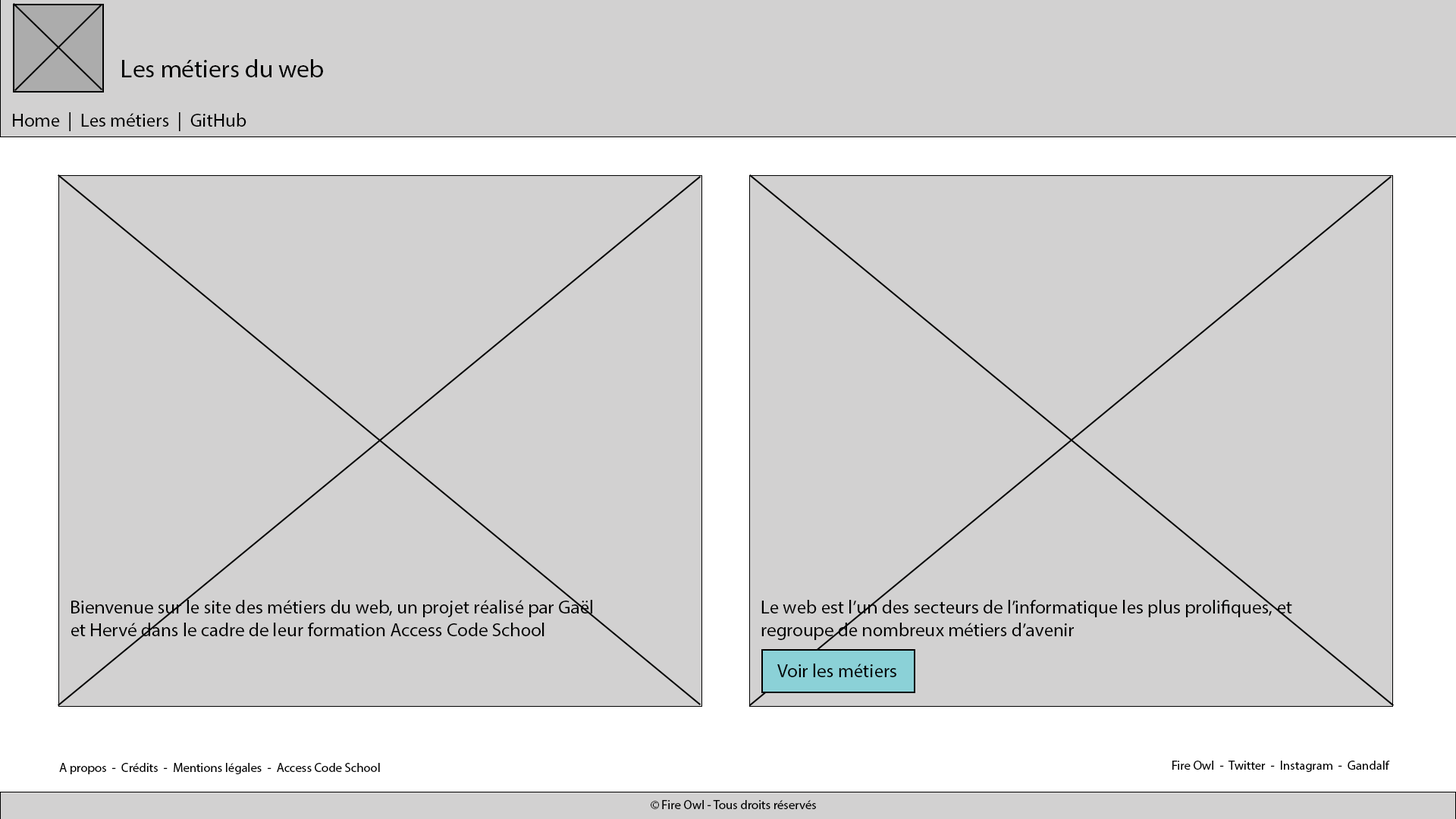
<style>
.page{position:relative;width:1456px;height:819px;background:#d2d1d1}
.page>*{position:absolute;margin:0}
.t1{font:25.3px "MyriadPro-Regular";color:#000000}
.t2{font:19px "MyriadPro-Regular";color:#000000}
.t3{font:12.6px "MyriadPro-Regular";color:#000000}
</style>
<div class="page">
<p class="t1" style="left:122px;top:59px;width:201px;height:18px">Les métiers du web</p>
<p class="t2" style="left:13px;top:112px;width:233px;height:19px">Home  |  Les métiers  |  GitHub</p>
<p class="t2" style="left:71px;top:600px;width:521px;height:36px">Bienvenue sur le site des métiers du web, un projet réalisé par Gaël et Hervé dans le cadre de leur formation Access Code School</p>
<p class="t2" style="left:761px;top:600px;width:531px;height:40px">Le web est l’un des secteurs de l’informatique les plus prolifiques, et regroupe de nombreux métiers d’avenir</p>
<p class="t2" style="left:777px;top:664px;width:119px;height:13px">Voir les métiers</p>
<p class="t3" style="left:1172px;top:761px;width:218px;height:11px">Fire Owl  -  Twitter  -  Instagram  -  Gandalf</p>
<p class="t3" style="left:59px;top:763px;width:321px;height:11px">A propos  -  Crédits  -  Mentions légales  -  Access Code School</p>
<p class="t3" style="left:651px;top:800px;width:165px;height:9px">© Fire Owl - Tous droits réservés</p>
</div>
